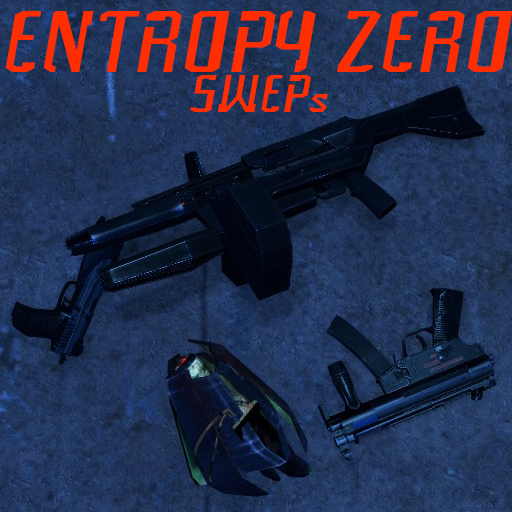
<style>
.page{position:relative;width:512px;height:512px}
.page>*{position:absolute;margin:0}
.t1{font:82.9px "Frak-Regular";color:#ff2e00}
.t2{font:50px "Frak-Regular";color:#ff2e00}
</style>
<div class="page">
<p class="t1" style="left:5px;top:11px;width:508px;height:61px">ENTROPY ZERO</p>
<p class="t2" style="left:190px;top:75px;width:138px;height:37px">SWEPs</p>
</div>
